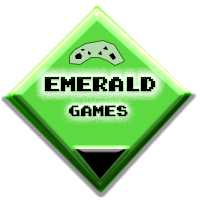
<style>
.page{position:relative;width:200px;height:200px;background:#ffffff}
.page>*{position:absolute;margin:0}
.t1{font:16px "Super-Mario-Bros.-2";color:#000000}
.t2{font:12px "Super-Mario-Bros.-2";color:#000000}
</style>
<div class="page">
<p class="t1" style="left:45px;top:77px;width:110px;height:14px">Emerald</p>
<p class="t2" style="left:69px;top:105px;width:59px;height:11px">Games</p>
</div>
